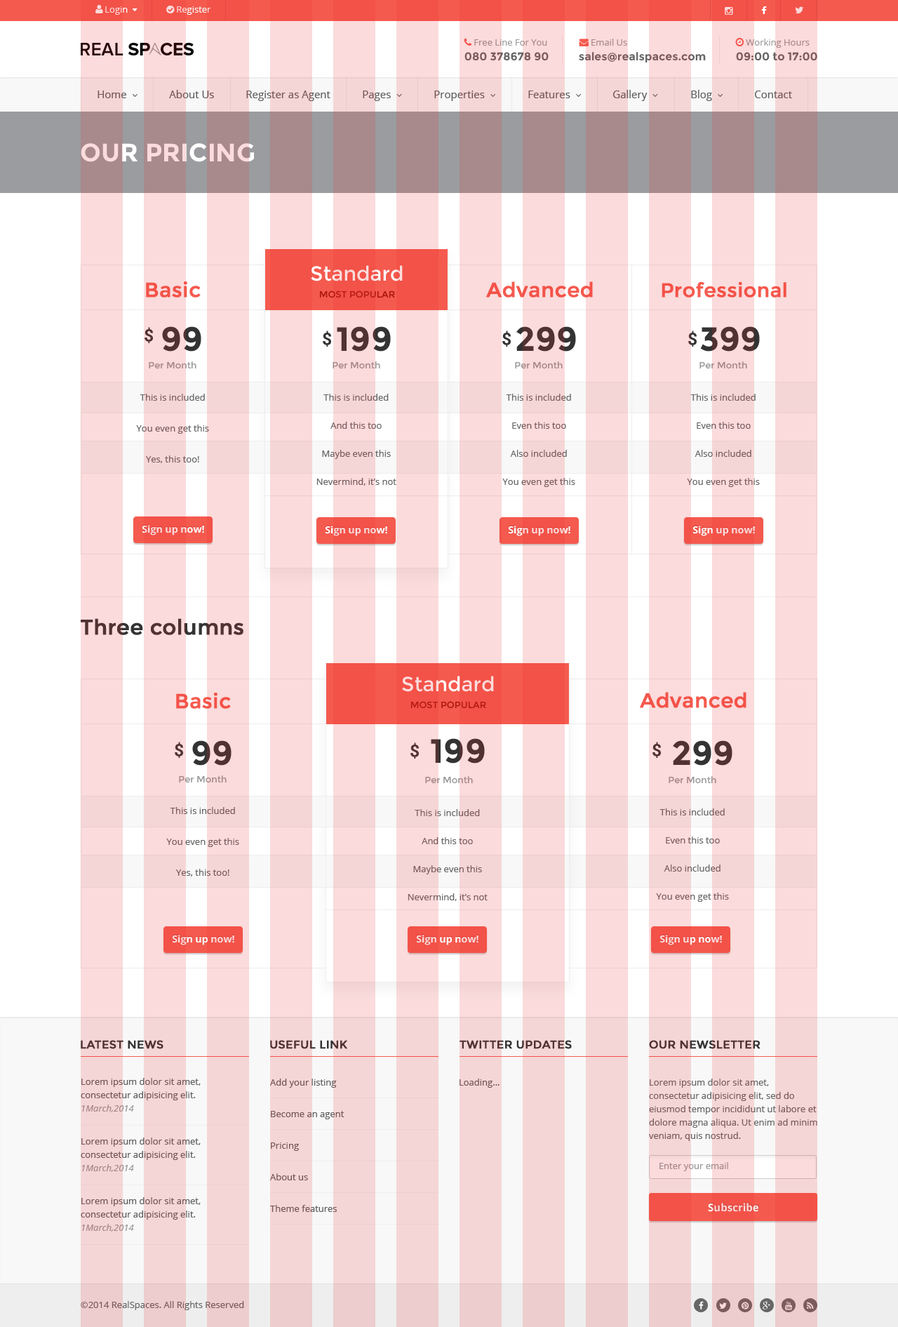
<style>
.page{position:relative;width:898px;height:1327px;background:#fbdbdc}
.page>*{position:absolute;margin:0}
.t1{font:11.2px "Montserrat-Bold";color:#666666}
.t2{font:10.5px "OpenSans";color:#5e5e5e}
.t3{font:25.3px "Montserrat-Bold";color:#fbdbdc;text-transform:uppercase}
.t4{font:9.1px/16.8px "Montserrat-Regular"}
.t5{font:20.4px/16.8px "Montserrat-Regular"}
.t6{font:20.4px "Montserrat-Regular";color:#f55a4e;font-weight:bold}
.t7{font:19.7px "Montserrat-Regular";color:#f55a4e;font-weight:bold}
.t8{font:16.8px "Roboto-Bold";color:#513232}
.t9{font:33.7px "Montserrat-Bold"}
.t10{font:16.8px "Roboto-Bold";color:#333333}
.t11{font:9.1px "Montserrat-Regular";color:#999999}
.t12{font:9.1px/30.9px "OpenSans";color:#666666}
.t13{font:9.1px/28.1px "OpenSans";color:#666666}
.t14{font:9.8px "OpenSans-Bold"}
.t15{font:21.1px "Montserrat-Regular";color:#513232;font-weight:bold}
.t16{font:11.2px "Montserrat-Regular";color:#513232;font-weight:bold}
.t17{font:9.1px/13.3px "OpenSans";color:#5e5e5e}
.t18{font:9.1px/13.3px "OpenSans-Italic";color:#999999}
.t19{font:9.1px/31.6px "OpenSans";color:#5e5e5e}
.t20{font:9.1px "OpenSans";color:#5e5e5e}
.t21{font:9.1px/13.3px "OpenSans";color:#666666}
.t22{font:9.1px "OpenSans";color:#999999}
.t23{font:10.5px "OpenSans-Bold";color:#fbdbdc}
.t24{font:9.1px "OpenSans";color:#666666}
</style>
<div class="page">
<p class="t1" style="left:465px;top:52px;width:84px;height:9px">080 378678 90</p>
<p class="t1" style="left:579px;top:52px;width:127px;height:10px">sales@realspaces.com</p>
<p class="t1" style="left:736px;top:52px;width:82px;height:9px">09:00 to 17:00</p>
<p class="t2" style="left:169px;top:90px;width:45px;height:8px">About Us</p>
<p class="t2" style="left:246px;top:91px;width:85px;height:10px">Register as Agent</p>
<p class="t2" style="left:755px;top:91px;width:37px;height:7px">Contact</p>
<p class="t3" style="left:81px;top:143px;width:173px;height:19px">our pricing</p>
<p class="t4" style="left:311px;top:265px;width:92px;height:33px;text-align:center"><span class="t5">Standard<br></span>MOST POPULAR</p>
<p class="t6" style="left:146px;top:281px;width:55px;height:17px">Basic</p>
<p class="t6" style="left:486px;top:281px;width:107px;height:17px">Advanced</p>
<p class="t7" style="left:662px;top:281px;width:125px;height:17px">Professional</p>
<p class="t8" style="left:145px;top:327px;width:8px;height:16px">$</p>
<p class="t9" style="left:162px;top:326px;width:39px;height:26px">99</p>
<p class="t9" style="left:337px;top:326px;width:54px;height:26px">199</p>
<p class="t9" style="left:517px;top:326px;width:59px;height:26px">299</p>
<p class="t9" style="left:700px;top:326px;width:60px;height:26px">399</p>
<p class="t10" style="left:323px;top:331px;width:8px;height:16px">$</p>
<p class="t10" style="left:503px;top:331px;width:8px;height:16px">$</p>
<p class="t10" style="left:689px;top:331px;width:8px;height:16px">$</p>
<p class="t11" style="left:149px;top:361px;width:48px;height:8px">Per Month</p>
<p class="t11" style="left:333px;top:361px;width:47px;height:8px">Per Month</p>
<p class="t11" style="left:515px;top:361px;width:48px;height:8px">Per Month</p>
<p class="t11" style="left:700px;top:361px;width:48px;height:8px">Per Month</p>
<p class="t12" style="left:136px;top:394px;width:73px;height:69px;text-align:center">This is included<br>You even get this<br>Yes, this too!</p>
<p class="t13" style="left:317px;top:394px;width:80px;height:92px;text-align:center">This is included<br>And this too<br>Maybe even this<br>Nevermind, it’s not</p>
<p class="t13" style="left:503px;top:394px;width:73px;height:93px;text-align:center">This is included<br>Even this too<br>Also included<br>You even get this</p>
<p class="t13" style="left:687px;top:394px;width:73px;height:93px;text-align:center">This is included<br>Even this too<br>Also included<br>You even get this</p>
<p class="t14" style="left:142px;top:525px;width:62px;height:11px">Sign up now!</p>
<p class="t14" style="left:325px;top:526px;width:62px;height:10px">Sign up now!</p>
<p class="t14" style="left:508px;top:526px;width:63px;height:10px">Sign up now!</p>
<p class="t14" style="left:693px;top:526px;width:62px;height:10px">Sign up now!</p>
<p class="t15" style="left:81px;top:618px;width:163px;height:17px">Three columns</p>
<p class="t4" style="left:402px;top:676px;width:92px;height:33px;text-align:center"><span class="t5">Standard<br></span>MOST POPULAR</p>
<p class="t6" style="left:176px;top:693px;width:55px;height:16px">Basic</p>
<p class="t6" style="left:640px;top:692px;width:107px;height:16px">Advanced</p>
<p class="t8" style="left:175px;top:742px;width:8px;height:16px">$</p>
<p class="t9" style="left:192px;top:740px;width:40px;height:26px">99</p>
<p class="t8" style="left:411px;top:743px;width:8px;height:16px">$</p>
<p class="t9" style="left:431px;top:738px;width:54px;height:26px">199</p>
<p class="t8" style="left:653px;top:742px;width:8px;height:16px">$</p>
<p class="t9" style="left:673px;top:740px;width:60px;height:26px">299</p>
<p class="t11" style="left:179px;top:776px;width:48px;height:7px">Per Month</p>
<p class="t11" style="left:425px;top:776px;width:48px;height:8px">Per Month</p>
<p class="t11" style="left:669px;top:776px;width:48px;height:8px">Per Month</p>
<p class="t12" style="left:166px;top:807px;width:73px;height:70px;text-align:center">This is included<br>You even get this<br>Yes, this too!</p>
<p class="t13" style="left:408px;top:809px;width:80px;height:92px;text-align:center">This is included<br>And this too<br>Maybe even this<br>Nevermind, it’s not</p>
<p class="t13" style="left:656px;top:809px;width:73px;height:93px;text-align:center">This is included<br>Even this too<br>Also included<br>You even get this</p>
<p class="t14" style="left:172px;top:935px;width:62px;height:10px">Sign up now!</p>
<p class="t14" style="left:416px;top:935px;width:63px;height:10px">Sign up now!</p>
<p class="t14" style="left:660px;top:935px;width:62px;height:10px">Sign up now!</p>
<p class="t16" style="left:81px;top:1040px;width:83px;height:9px">LATEST NEWS</p>
<p class="t16" style="left:270px;top:1040px;width:77px;height:9px">USEFUL LINK</p>
<p class="t16" style="left:460px;top:1040px;width:112px;height:9px">TWITTER UPDATES</p>
<p class="t16" style="left:649px;top:1040px;width:112px;height:9px">OUR NEWSLETTER</p>
<p class="t17" style="left:81px;top:1078px;width:120px;height:34px">Lorem ipsum dolor sit amet, consectetur adipisicing elit.<br><span class="t18">1March,2014</span></p>
<p class="t19" style="left:270px;top:1079px;width:75px;height:133px">Add your listing<br>Become an agent<br>Pricing<br>About us<br>Theme features</p>
<p class="t20" style="left:460px;top:1079px;width:40px;height:9px">Loading...</p>
<p class="t21" style="left:649px;top:1079px;width:169px;height:62px">Lorem ipsum dolor sit amet, consectetur adipisicing elit, sed do eiusmod tempor incididunt ut labore et dolore magna aliqua. Ut enim ad minim veniam, quis nostrud.</p>
<p class="t17" style="left:81px;top:1138px;width:120px;height:34px">Lorem ipsum dolor sit amet, consectetur adipisicing elit.<br><span class="t18">1March,2014</span></p>
<p class="t22" style="left:660px;top:1162px;width:69px;height:9px">Enter your email</p>
<p class="t17" style="left:81px;top:1197px;width:120px;height:35px">Lorem ipsum dolor sit amet, consectetur adipisicing elit.<br><span class="t18">1March,2014</span></p>
<p class="t23" style="left:708px;top:1203px;width:51px;height:9px">Subscribe</p>
<p class="t24" style="left:81px;top:1301px;width:163px;height:9px">©2014 RealSpaces. All Rights Reserved</p>
</div>
